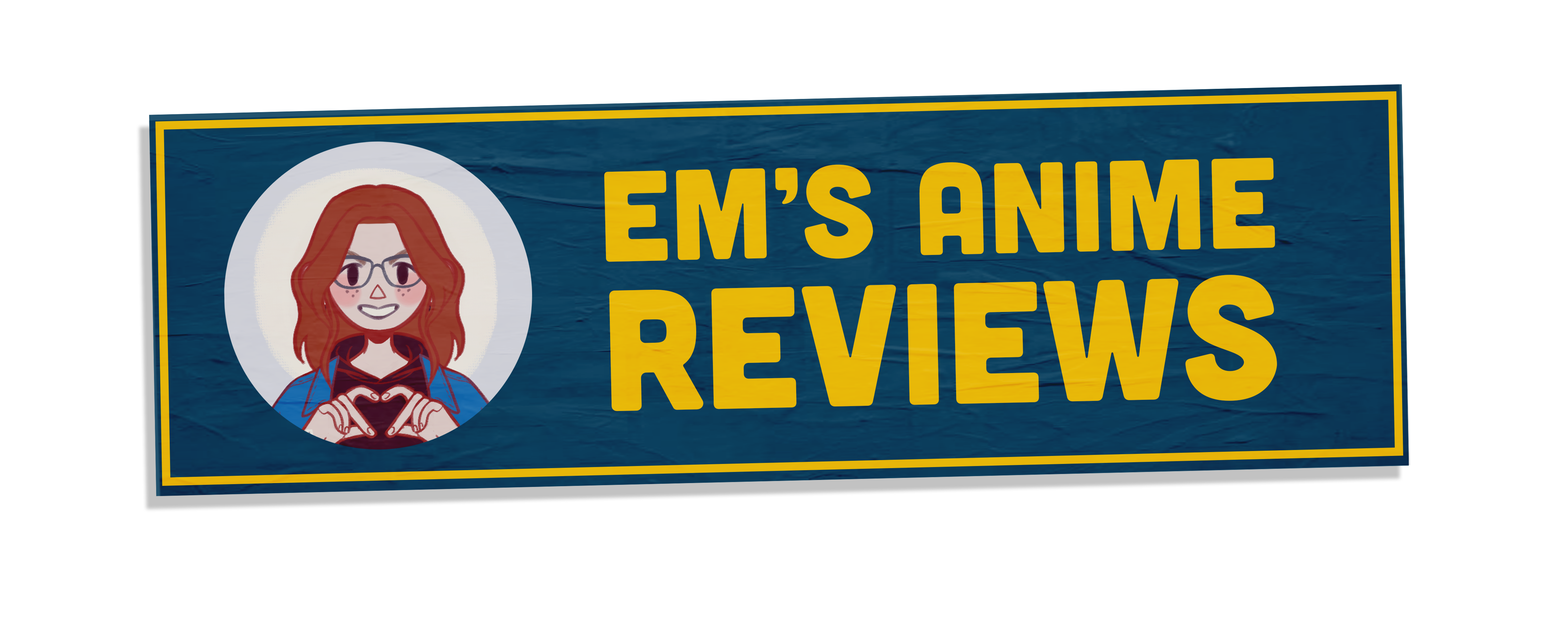
<style>
.page{position:relative;width:1568px;height:644px;background:#ffffff}
.page>*{position:absolute;margin:0}
.t1{font:128.5px "Cubano-Regular";color:#eabf1b}
.t2{font:172.2px/149.7px "Cubano-Regular";color:#eabf1b}
</style>
<div class="page">
<p class="t1" style="left:604px;top:157px;width:673px;height:255px;text-align:center;rotate:-1deg">Em’s Anime<br><span class="t2">Reviews</span></p>
</div>
